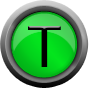
<style>
.page{position:relative;width:89px;height:88px;background:#ffffff}
.page>*{position:absolute;margin:0}
.t1{font:56px "Tahoma";color:#000000}
</style>
<div class="page">
<p class="t1" style="left:28px;top:26px;width:33px;height:41px">T</p>
</div>
